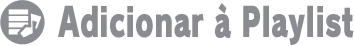
<style>
.page{position:relative;width:354px;height:46px;background:#ffffff}
.page>*{position:absolute;margin:0}
.t1{font:40px "RodinPro-UB";color:#8b8c92;scale:0.7 1}
</style>
<div class="page">
<p class="t1" style="left:58px;top:3px;width:296px;height:42px">Adicionar à Playlist</p>
</div>
